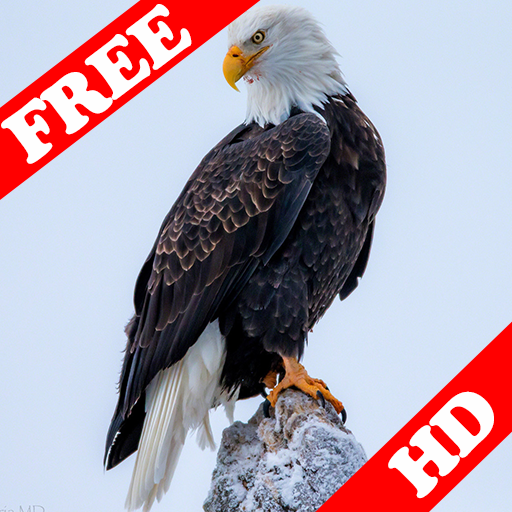
<style>
.page{position:relative;width:512px;height:512px}
.page>*{position:absolute;margin:0}
.t1{font:72px "CooperBlackStd";letter-spacing:-0.025em;color:#fefefe}
</style>
<div class="page">
<p class="t1" style="left:1px;top:4px;width:191px;height:160px;rotate:-37deg">FREE</p>
<p class="t1" style="left:388px;top:391px;width:106px;height:108px;rotate:-45deg">HD</p>
</div>
